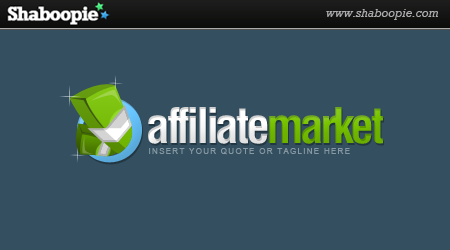
<style>
.page{position:relative;width:450px;height:250px;background:#334f60}
.page>*{position:absolute;margin:0}
.t1{font:48px "Helvetica-Condensed-Bold";letter-spacing:-0.075em;color:#ffffff}
.t2{font:48px "Helvetica-Condensed-Bold";letter-spacing:-0.075em;color:#78c400}
.t3{font:8px "ArialMT";letter-spacing:0.16em;color:#8999a3}
</style>
<div class="page">
<p class="t1" style="left:148px;top:107px;width:235px;height:37px">affiliate<span class="t2">market</span></p>
<p class="t3" style="left:149px;top:148px;width:201px;height:7px">INSERT YOUR QUOTE OR TAGLINE HERE</p>
</div>
